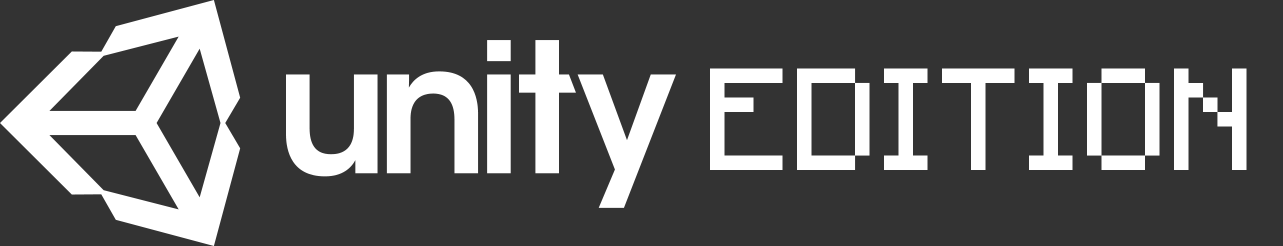
<style>
.page{position:relative;width:1283px;height:246px;background:#333333}
.page>*{position:absolute;margin:0}
.t1{font:145px "Minecraft-Regular";color:#ffffff}
</style>
<div class="page">
<p class="t1" style="left:710px;top:68px;width:537px;height:102px">EDITION</p>
</div>
